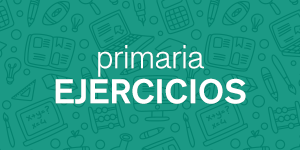
<style>
.page{position:relative;width:300px;height:150px;background:#1b9985}
.page>*{position:absolute;margin:0}
.t1{font:34px/35px "AkzidenzGroteskBQ-Medium";color:#ffffff}
.t2{font:34px/35px "AkzidenzGroteskBQ-Light";letter-spacing:-0.02em;color:#ffffff}
</style>
<div class="page">
<p class="t1" style="left:55px;top:45px;width:191px;height:59px;text-align:center"><span class="t2">primaria<br></span>EJERCICIOS</p>
</div>
